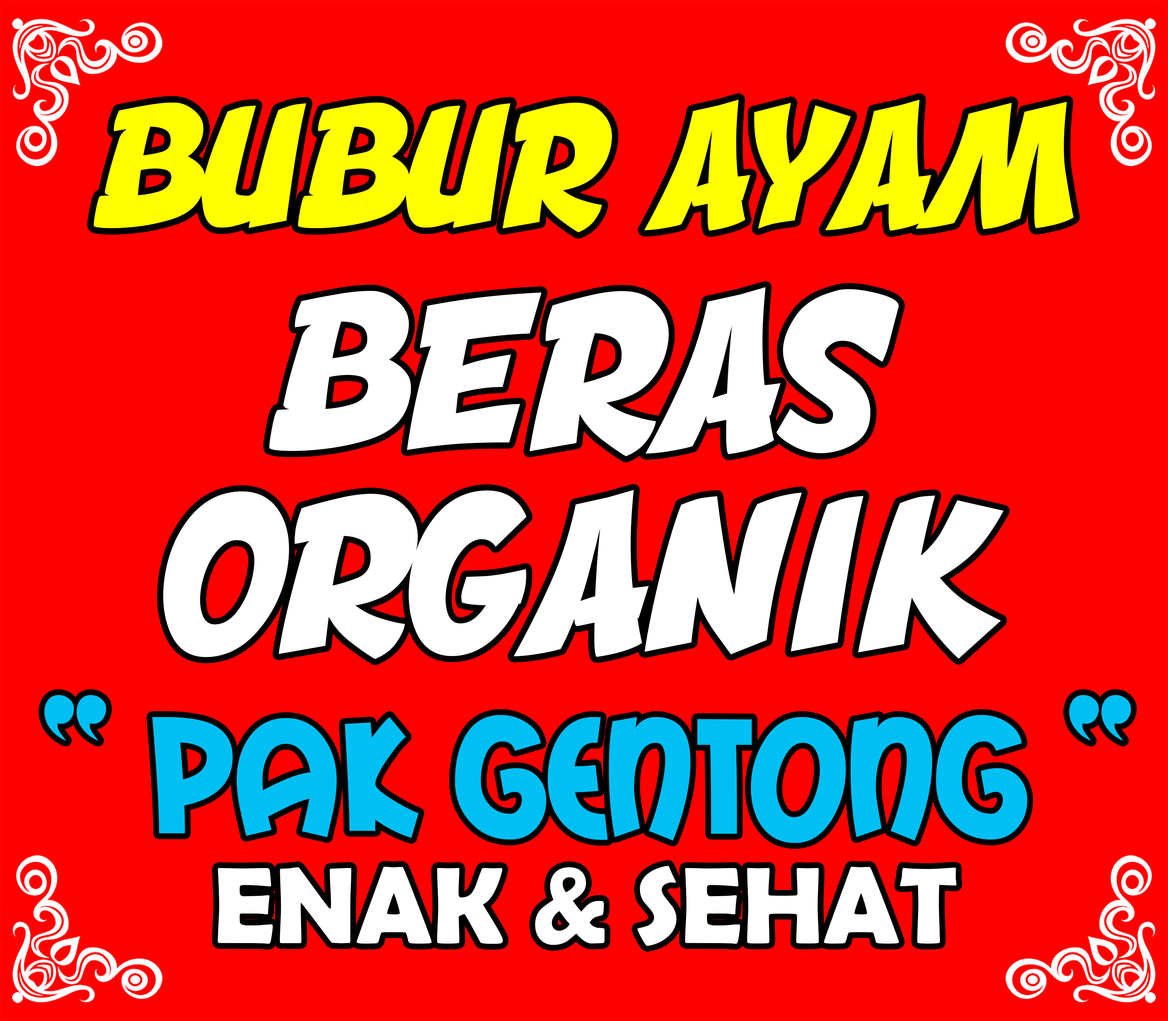
<style>
.page{position:relative;width:1168px;height:1021px;background:#ff0000}
.page>*{position:absolute;margin:0}
.t1{font:258.9px "Engcomica";color:#ffff00}
.t2{font:329.9px "Engcomica";color:#ffffff}
.t3{font:179px "MailRayStuff";color:#00bff3}
.t4{font:109.5px "BerlinSansFBDemi-Bold";color:#ffffff}
</style>
<div class="page">
<p class="t1" style="left:94px;top:100px;width:979px;height:132px">BUBUR AYAM</p>
<p class="t2" style="left:269px;top:287px;width:629px;height:169px">BERAS</p>
<p class="t2" style="left:163px;top:490px;width:840px;height:169px">ORGANIK</p>
<p class="t3" style="left:44px;top:695px;width:1087px;height:148px">“ PAK GENTONG “</p>
<p class="t4" style="left:218px;top:866px;width:738px;height:80px">ENAK &amp; SEHAT</p>
</div>
